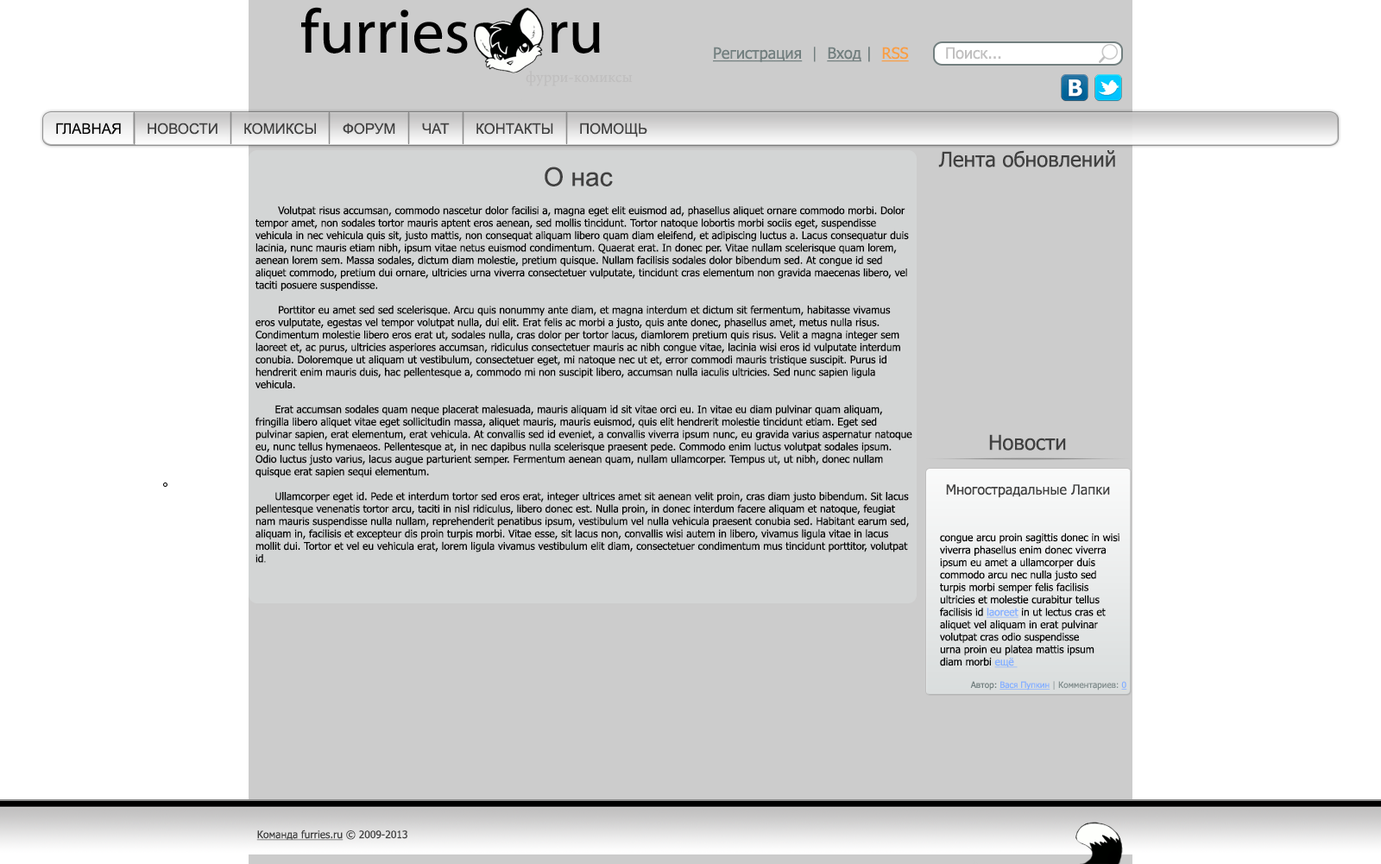
<style>
.page{position:relative;width:1381px;height:864px;background:#ffffff}
.page>*{position:absolute;margin:0}
.t1{font:62.1px "MyriadWebPro";color:#000000}
.t2{font:15.5px "Tahoma";color:#727f7f;text-decoration:underline}
.t3{font:15.5px "Tahoma";color:#727f7f}
.t4{font:15.5px "Tahoma";color:#f89f44;text-decoration:underline}
.t5{font:15.5px "Tahoma";color:#c0bfbf}
.t6{font:15.5px "MinionPro-Regular";color:#c0bfbf}
.t7{font:20.7px "ArialMT";color:#000000;font-variant:small-caps}
.t8{font:20.7px "ArialMT";color:#404040;font-variant:small-caps}
.t9{font:20.7px "Tahoma";color:#404040}
.t10{font:25.9px "ArialMT";color:#404040}
.t11{font:10.4px "Tahoma";color:#000000}
.t12{font:8.6px "ArialMT";color:#000000}
.t13{font:13.8px "Tahoma";color:#404040}
.t14{font:10.4px "Tahoma";color:#85b0ff;text-decoration:underline}
.t15{font:10.4px "Tahoma";color:#86b1ff;text-decoration:underline}
.t16{font:8.6px "Tahoma";color:#818d8d}
.t17{font:8.6px "Tahoma";color:#727f7f}
.t18{font:8.6px "Tahoma";color:#85b0ff;text-decoration:underline}
.t19{font:8.6px "Tahoma";color:#a4acac}
.t20{font:10.4px "Tahoma";color:#404040;text-decoration:underline}
.t21{font:10.4px "Tahoma";color:#404040}
</style>
<div class="page">
<p class="t1" style="left:301px;top:7px;width:167px;height:46px">furries</p>
<p class="t1" style="left:551px;top:22px;width:49px;height:31px">ru</p>
<p class="t2" style="left:713px;top:47px;width:196px;height:15px">Регистрация<span class="t3">  |  </span>Вход<span class="t3"> |  </span><span class="t4">RSS</span></p>
<p class="t5" style="left:946px;top:47px;width:55px;height:13px">Поиск...</p>
<p class="t6" style="left:525px;top:71px;width:107px;height:15px">фурри-комиксы</p>
<p class="t7" style="left:56px;top:123px;width:65px;height:12px">главная</p>
<p class="t8" style="left:148px;top:123px;width:69px;height:12px">новости</p>
<p class="t8" style="left:244px;top:123px;width:72px;height:12px">комиксы</p>
<p class="t8" style="left:343px;top:123px;width:52px;height:12px">форум</p>
<p class="t8" style="left:422px;top:123px;width:28px;height:11px">чат</p>
<p class="t8" style="left:476px;top:123px;width:77px;height:12px">контакты</p>
<p class="t8" style="left:580px;top:123px;width:67px;height:14px">помощь</p>
<p class="t9" style="left:938px;top:150px;width:177px;height:17px">Лента обновлений</p>
<p class="t10" style="left:544px;top:167px;width:69px;height:19px">О нас</p>
<p class="t11" style="left:255px;top:205px;width:657px;height:358px">Volutpat risus accumsan, commodo nascetur dolor facilisi a, magna eget elit euismod ad, phasellus aliquet ornare commodo morbi. Dolor tempor amet, non sodales tortor mauris aptent eros aenean, sed mollis tincidunt. Tortor natoque lobortis morbi sociis eget, suspendisse vehicula in nec vehicula quis sit, justo mattis, non consequat aliquam libero quam diam eleifend, et adipiscing luctus a. Lacus consequatur duis lacinia, nunc mauris etiam nibh, ipsum vitae netus euismod condimentum. Quaerat erat. In donec per. Vitae nullam scelerisque quam lorem, aenean lorem sem. Massa sodales, dictum diam molestie, pretium quisque. Nullam facilisis sodales dolor bibendum sed. At congue id sed aliquet commodo, pretium dui ornare, ultricies urna viverra consectetuer vulputate, tincidunt cras elementum non gravida maecenas libero, vel taciti posuere suspendisse.<br><br>       Porttitor eu amet sed sed scelerisque. Arcu quis nonummy ante diam, et magna interdum et dictum sit fermentum, habitasse vivamus eros vulputate, egestas vel tempor volutpat nulla, dui elit. Erat felis ac morbi a justo, quis ante donec, phasellus amet, metus nulla risus. Condimentum molestie libero eros erat ut, sodales nulla, cras dolor per tortor lacus, diamlorem pretium quis risus. Velit a magna integer sem laoreet et, ac purus, ultricies asperiores accumsan, ridiculus consectetuer mauris ac nibh congue vitae, lacinia wisi eros id vulputate interdum conubia. Doloremque ut aliquam ut vestibulum, consectetuer eget, mi natoque nec ut et, error commodi mauris tristique suscipit. Purus id hendrerit enim mauris duis, hac pellentesque a, commodo mi non suscipit libero, accumsan nulla iaculis ultricies. Sed nunc sapien ligula vehicula.<br><br>      Erat accumsan sodales quam neque placerat malesuada, mauris aliquam id sit vitae orci eu. In vitae eu diam pulvinar quam aliquam, fringilla libero aliquet vitae eget sollicitudin massa, aliquet mauris, mauris euismod, quis elit hendrerit molestie tincidunt etiam. Eget sed pulvinar sapien, erat elementum, erat vehicula. At convallis sed id eveniet, a convallis viverra ipsum nunc, eu gravida varius aspernatur natoque eu, nunc tellus hymenaeos. Pellentesque at, in nec dapibus nulla scelerisque praesent pede. Commodo enim luctus volutpat sodales ipsum. Odio luctus justo varius, lacus augue parturient semper. Fermentum aenean quam, nullam ullamcorper. Tempus ut, ut nibh, donec nullam quisque erat sapien sequi elementum.<br><br>      Ullamcorper eget id. Pede et interdum tortor sed eros erat, integer ultrices amet sit aenean velit proin, cras diam justo bibendum. Sit lacus pellentesque venenatis tortor arcu, taciti in nisl ridiculus, libero donec est. Nulla proin, in donec interdum facere aliquam et natoque, feugiat nam mauris suspendisse nulla nullam, reprehenderit penatibus ipsum, vestibulum vel nulla vehicula praesent conubia sed. Habitant earum sed, aliquam in, facilisis et excepteur dis proin turpis morbi. Vitae esse, sit lacus non, convallis wisi autem in libero, vivamus ligula vitae in lacus mollit dui. Tortor et vel eu vehicula erat, lorem ligula vivamus vestibulum elit diam, consectetuer condimentum mus tincidunt porttitor, volutpat id<span class="t12">.</span></p>
<p class="t9" style="left:989px;top:434px;width:77px;height:16px">Новости</p>
<p class="t13" style="left:946px;top:484px;width:164px;height:14px">Многострадальные Лапки</p>
<p class="t11" style="left:940px;top:532px;width:179px;height:136px">congue arcu proin sagittis donec in wisi <br>viverra phasellus enim donec viverra <br>ipsum eu amet a ullamcorper duis <br>commodo arcu nec nulla justo sed <br>turpis morbi semper felis facilisis <br>ultricies et molestie curabitur tellus <br>facilisis id <span class="t14">laoreet </span>in ut lectus cras et <br>aliquet vel aliquam in erat pulvinar <br>volutpat cras odio suspendisse <br>urna proin eu platea mattis ipsum <br>diam morbi <span class="t15">ещё</span></p>
<p class="t16" style="left:970px;top:681px;width:157px;height:9px"><span class="t17">Автор: </span><span class="t18">Вася Пупкин </span><span class="t19">| </span>Комментариев: <span class="t18">0</span></p>
<p class="t20" style="left:256px;top:829px;width:151px;height:11px"><span class="t21"> </span>Команда furries.ru<span class="t21"> © 2009-2013</span></p>
</div>
